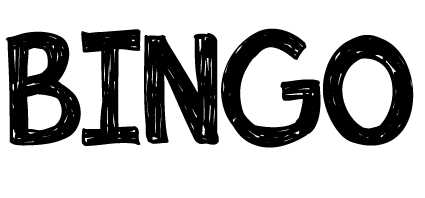
<style>
.page{position:relative;width:425px;height:198px;background:#ffffff}
.page>*{position:absolute;margin:0}
.t1{font:160px "appleberry";color:#000000}
</style>
<div class="page">
<p class="t1" style="left:5px;top:28px;width:409px;height:120px">BINGO</p>
</div>
